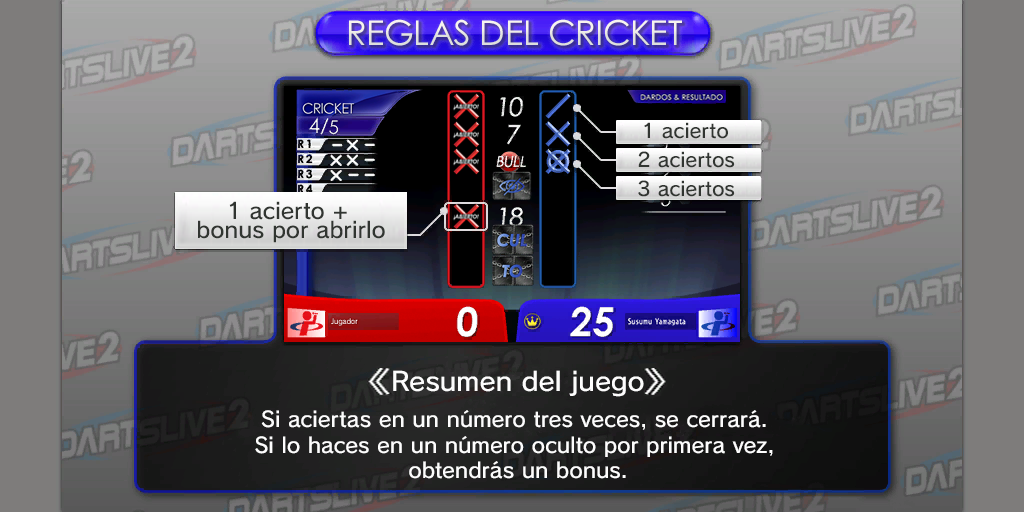
<style>
.page{position:relative;width:1024px;height:512px}
.page>*{position:absolute;margin:0}
.t1{font:34.1px "CenturyGothicPaneuropean";color:#eae9e6}
.t2{font:19.5px "SCEPS3RodinLATIN-Regular";color:#313531}
.t3{font:22px/19px "SCEPS3RodinLATIN-Regular";color:#313531}
.t4{font:25.9px "SCEPS3RodinLATIN-Regular";color:#fdfdfd;scale:1.04 1}
.t5{font:21px "SCEPS3RodinLATIN-Regular";color:#fdfdfd}
</style>
<div class="page">
<p class="t1" style="left:349px;top:19px;width:333px;height:27px">REGLAS DEL CRICKET</p>
<p class="t2" style="left:644px;top:122px;width:84px;height:17px">1 acierto</p>
<p class="t2" style="left:638px;top:151px;width:97px;height:17px">2 aciertos</p>
<p class="t2" style="left:638px;top:180px;width:97px;height:17px">3 aciertos</p>
<p class="t3" style="left:198px;top:201px;width:187px;height:42px;text-align:center">1 acierto + <br>bonus por abrirlo</p>
<p class="t4" style="left:393px;top:370px;width:251px;height:27px">Resumen del juego</p>
<p class="t5" style="left:255px;top:410px;width:518px;height:69px;text-align:center">Si aciertas en un número tres veces, se cerrará. <br>Si lo haces en un número oculto por primera vez, <br>obtendrás un bonus.</p>
</div>
